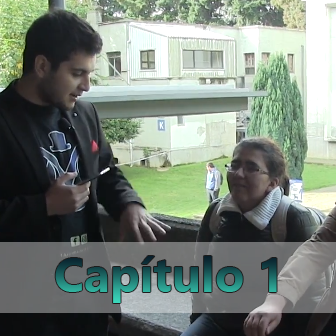
<style>
.page{position:relative;width:336px;height:336px}
.page>*{position:absolute;margin:0}
.t1{font:48px "NirmalaUI-Bold"}
</style>
<div class="page">
<p class="t1" style="left:55px;top:256px;width:222px;height:47px">Capítulo 1</p>
</div>
